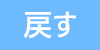
<style>
.page{position:relative;width:100px;height:50px;background:#6ebaff}
.page>*{position:absolute;margin:0}
.t1{font:30px "YuGothicUI-Bold";color:#ffffff}
</style>
<div class="page">
<p class="t1" style="left:23px;top:11px;width:53px;height:28px">戻す</p>
</div>
